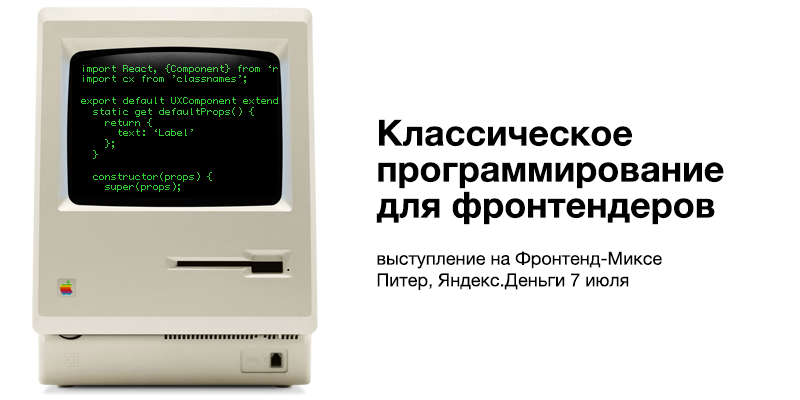
<style>
.page{position:relative;width:800px;height:400px;background:#ffffff}
.page>*{position:absolute;margin:0}
.t1{font:9px "Monaco";color:#33cc33}
.t2{font:36px/36px "HelveticaNeue-Bold";color:#000000}
.t3{font:18px "HelveticaNeue";color:#000000}
</style>
<div class="page">
<p class="t1" style="left:81px;top:64px;width:197px;height:128px">import React, {Component} from ‘r<br>import cx from ’classnames’;<br><br>export default UXComponent extend<br>  static get defaultProps() {<br>    return {<br>      text: ‘Label’<br>    };<br>  }<br><br>  constructor(props) {<br>    super(props);</p>
<p class="t2" style="left:376px;top:119px;width:348px;height:106px">Классическое <br>программирование<br>для фронтендеров</p>
<p class="t3" style="left:377px;top:251px;width:285px;height:39px">выступление на Фронтенд-Миксе <br>Питер, Яндекс.Деньги 7 июля</p>
</div>
